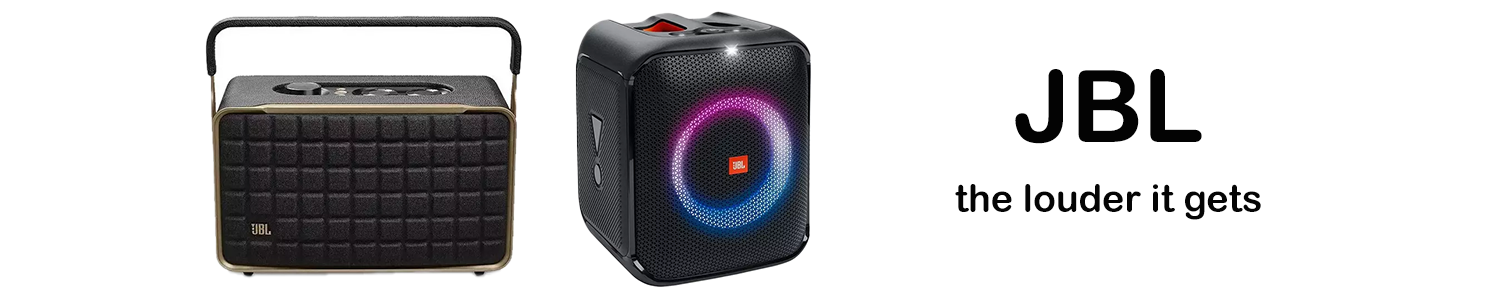
<style>
.page{position:relative;width:1507px;height:292px;background:#ffffff}
.page>*{position:absolute;margin:0}
.t1{font:100.1px "ArialRoundedMTBold";color:#030303}
.t2{font:37.7px "ArialRoundedMTBold";color:#050505}
</style>
<div class="page">
<p class="t1" style="left:1015px;top:69px;width:187px;height:75px">JBL</p>
<p class="t2" style="left:955px;top:184px;width:306px;height:36px">the louder it gets</p>
</div>
